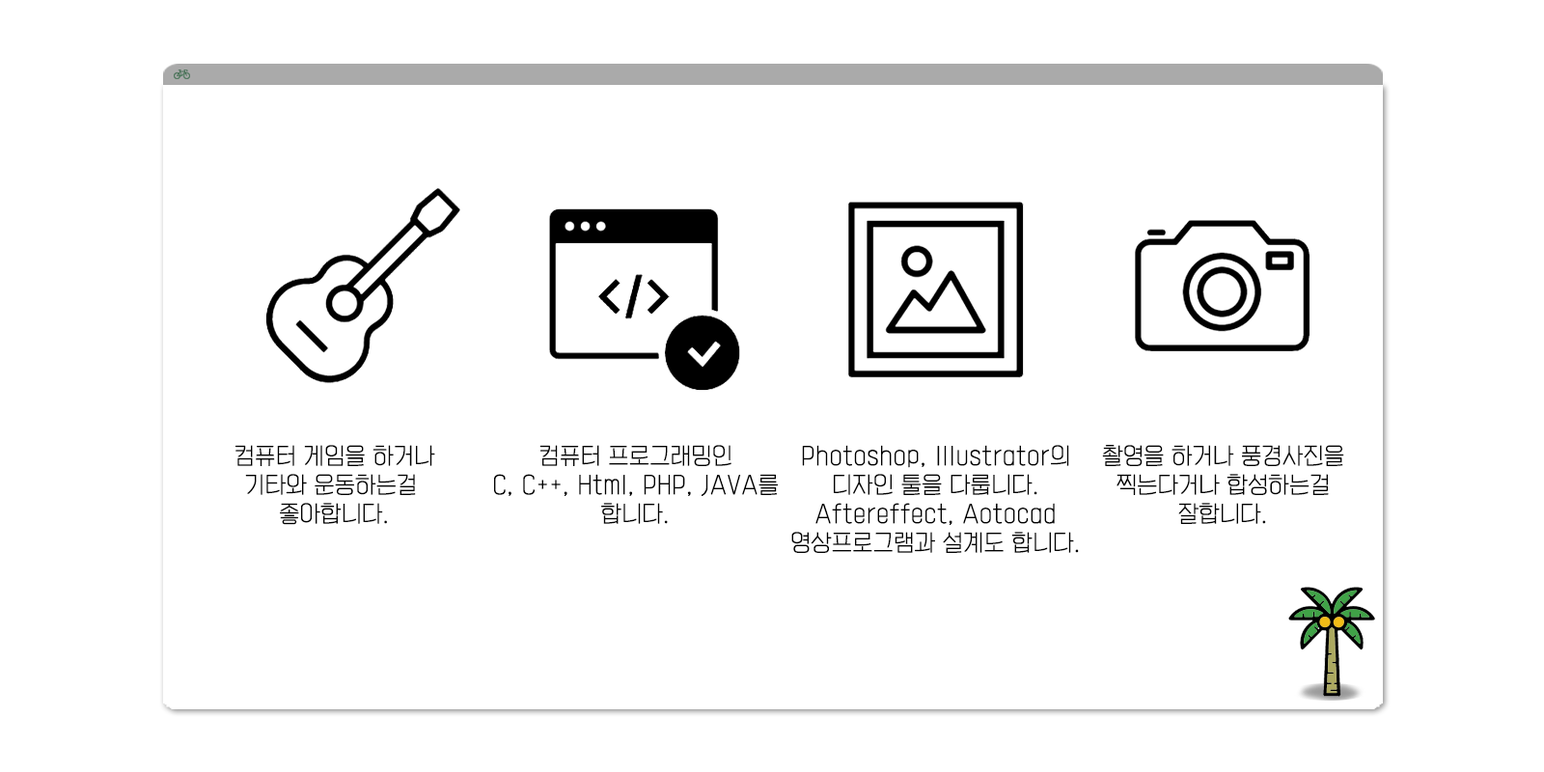
<style>
.page{position:relative;width:1544px;height:772px;background:#ffffff}
.page>*{position:absolute;margin:0}
.t1{font:21.2px/29px "KoreanYNSJG1-R";color:#000000;font-weight:bold}
</style>
<div class="page">
<p class="t1" style="left:236px;top:445px;width:199px;height:80px;text-align:center">컴퓨터 게임을 하거나<br>기타와 운동하는걸 <br>좋아합니다.</p>
<p class="t1" style="left:494px;top:445px;width:284px;height:79px;text-align:center">컴퓨터 프로그래밍인<br>C, C++, Html, PHP, JAVA를<br>합니다.</p>
<p class="t1" style="left:791px;top:445px;width:288px;height:108px;text-align:center">Photoshop, Illustrator의<br>디자인 툴을 다룹니다.<br>Aftereffect, Aotocad<br>영상프로그램과 설계도 합니다.</p>
<p class="t1" style="left:1102px;top:445px;width:243px;height:79px;text-align:center">촬영을 하거나 풍경사진을<br>찍는다거나 합성하는걸<br>잘합니다.</p>
</div>
